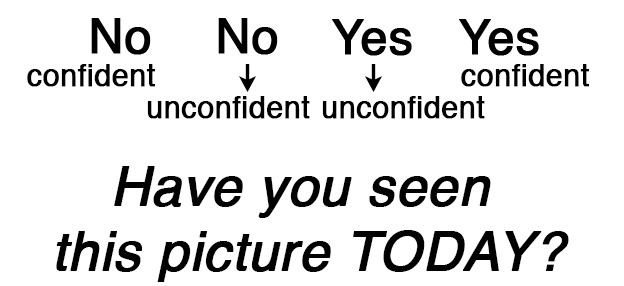
<style>
.page{position:relative;width:624px;height:286px;background:#ffffff}
.page>*{position:absolute;margin:0}
.t1{font:30px "Helvetica";color:#000000;font-weight:bold}
.t2{font:54px "Helvetica-Oblique";color:#000000;font-weight:bold}
</style>
<div class="page">
<p class="t1" style="left:27px;top:64px;width:128px;height:23px">confident</p>
<p class="t1" style="left:461px;top:64px;width:128px;height:23px">confident</p>
<p class="t1" style="left:147px;top:96px;width:163px;height:23px">unconfident</p>
<p class="t1" style="left:322px;top:96px;width:163px;height:23px">unconfident</p>
<p class="t2" style="left:56px;top:166px;width:513px;height:116px;text-align:center">Have you seen <br>this picture TODAY?</p>
</div>
